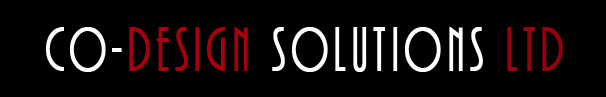
<style>
.page{position:relative;width:606px;height:97px;background:#000000}
.page>*{position:absolute;margin:0}
.t1{font:64.3px "ARBONNIE";letter-spacing:0.1em;color:#ffffff;font-weight:bold;scale:0.78 1}
.t2{font:64.3px "ARBONNIE";letter-spacing:0.1em;color:#a6000f;font-weight:bold;scale:0.78 1}
.t3{font:64.3px "ARBONNIE";letter-spacing:0.1em;color:#95000f;font-weight:bold;scale:0.78 1}
</style>
<div class="page">
<p class="t1" style="left:46px;top:27px;width:517px;height:45px">CO-<span class="t2">Design</span> Solutions <span class="t3">ltd</span></p>
</div>
